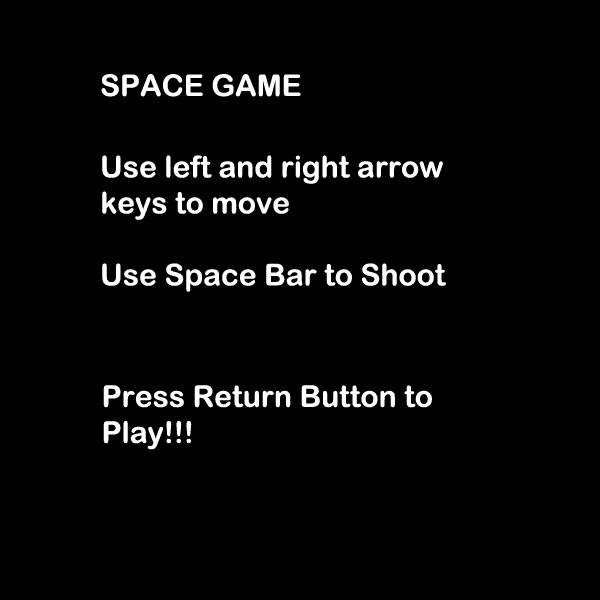
<style>
.page{position:relative;width:600px;height:600px;background:#000000}
.page>*{position:absolute;margin:0}
.t1{font:30px "ArialRoundedMTBold";color:#ffffff}
</style>
<div class="page">
<p class="t1" style="left:101px;top:74px;width:200px;height:23px">SPACE GAME</p>
<p class="t1" style="left:102px;top:155px;width:344px;height:137px">Use left and right arrow keys to move<br><br>Use Space Bar to Shoot</p>
<p class="t1" style="left:103px;top:385px;width:329px;height:65px">Press Return Button to Play!!!</p>
</div>
